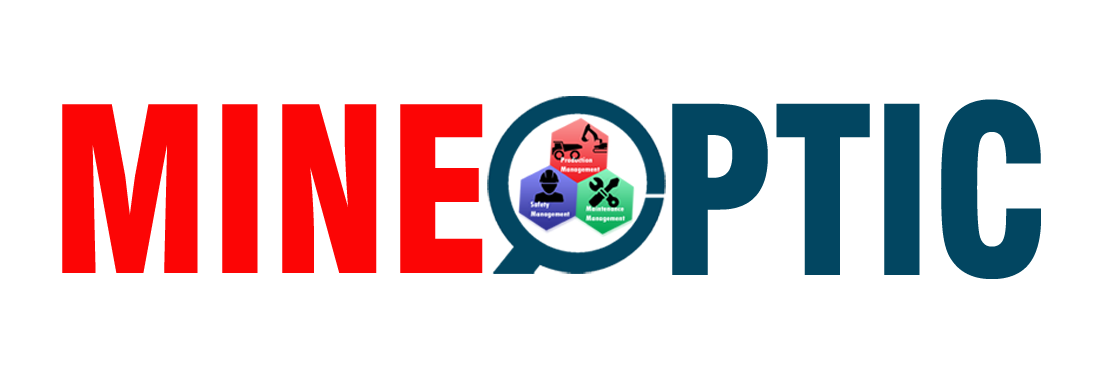
<style>
.page{position:relative;width:1107px;height:376px;background:#ffffff}
.page>*{position:absolute;margin:0}
.t1{font:227.8px "Swiss721BT-BlackCondensed";color:#024661;scale:0.88 1}
.t2{font:224.4px "Swiss721BT-BlackCondensed";color:#fc0505;scale:0.89 1}
</style>
<div class="page">
<p class="t1" style="left:672px;top:99px;width:369px;height:180px">PTIC</p>
<p class="t2" style="left:62px;top:104px;width:421px;height:169px">MINE</p>
</div>
